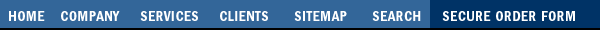
<style>
.page{position:relative;width:600px;height:30px;background:#336699}
.page>*{position:absolute;margin:0}
.t1{font:15px "FranklinGothic-DemiCnd";letter-spacing:0.02em;color:#ffffff}
</style>
<div class="page">
<p class="t1" style="left:9px;top:11px;width:36px;height:10px">HOME</p>
<p class="t1" style="left:61px;top:11px;width:59px;height:10px">COMPANY</p>
<p class="t1" style="left:140px;top:11px;width:58px;height:10px">SERVICES</p>
<p class="t1" style="left:220px;top:11px;width:48px;height:10px">CLIENTS</p>
<p class="t1" style="left:294px;top:11px;width:53px;height:10px">SITEMAP</p>
<p class="t1" style="left:372px;top:11px;width:49px;height:10px">SEARCH</p>
<p class="t1" style="left:442px;top:11px;width:133px;height:10px">SECURE ORDER FORM</p>
</div>
